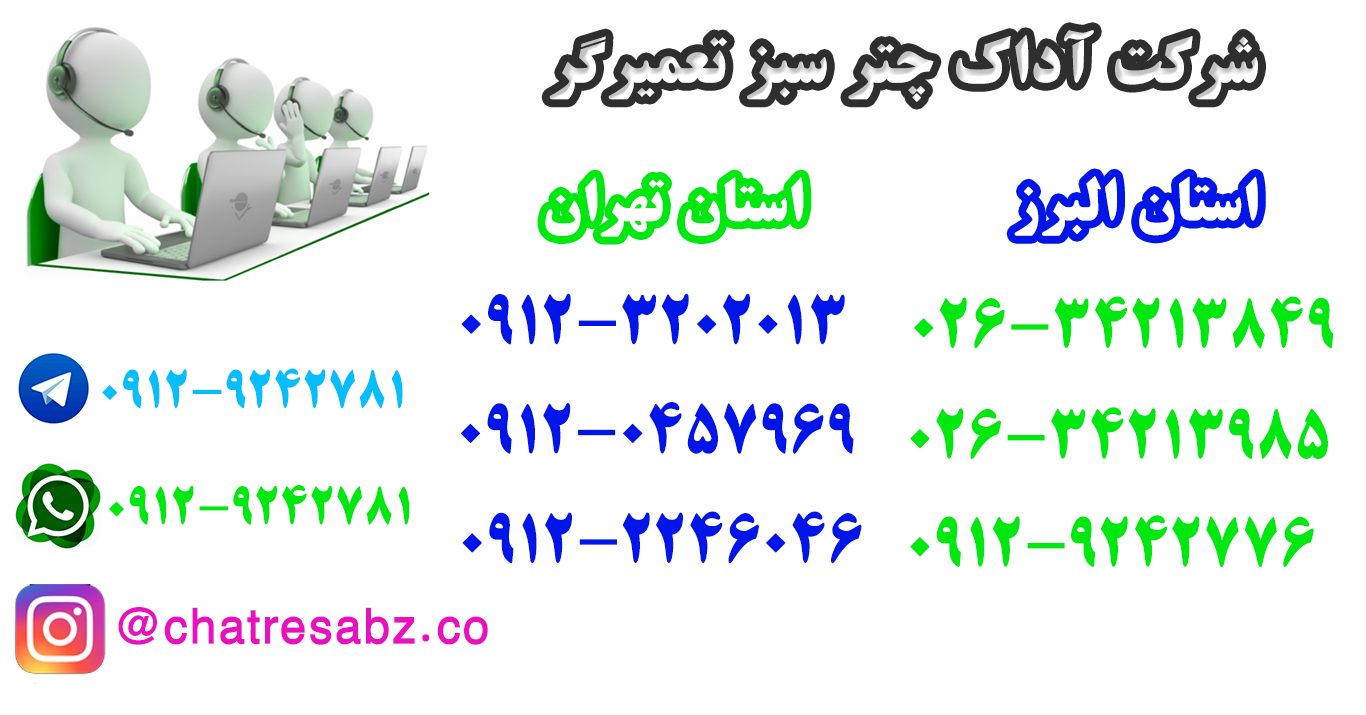
<style>
.page{position:relative;width:1366px;height:715px;background:#ffffff}
.page>*{position:absolute;margin:0}
.t1{font:59.6px "BTitrBold";letter-spacing:0.02em;color:#ffffff}
.t2{font:59.6px "BTitrBold";letter-spacing:0.02em;color:#0016e8}
.t3{font:59.6px "BTitrBold";letter-spacing:0.02em;color:#00e810}
.t4{font:45.9px "BTitrBold";letter-spacing:0.02em;color:#06befb}
.t5{font:45.9px "BTitrBold";letter-spacing:0.02em;color:#00e810}
.t6{font:50px "BYekan+-Bold";letter-spacing:0.02em;color:#e910be}
</style>
<div class="page">
<p class="t1" style="left:545px;top:177px;width:259px;height:60px">استان تهران</p>
<p class="t1" style="left:1014px;top:176px;width:244px;height:60px">استان البرز</p>
<p class="t2" style="left:461px;top:293px;width:384px;height:52px">۰۹۱۲-۳۲۰۲۰۱۳</p>
<p class="t3" style="left:914px;top:296px;width:420px;height:53px">۰26-34213849</p>
<p class="t4" style="left:102px;top:368px;width:301px;height:41px">۰۹۱۲-9242781</p>
<p class="t2" style="left:460px;top:402px;width:394px;height:52px">۰۹۱۲-0457969</p>
<p class="t3" style="left:910px;top:407px;width:418px;height:53px">۰26-34213985</p>
<p class="t5" style="left:109px;top:485px;width:301px;height:40px">۰۹۱۲-9242781</p>
<p class="t2" style="left:462px;top:511px;width:400px;height:53px">۰۹۱۲-2246046</p>
<p class="t3" style="left:910px;top:515px;width:404px;height:52px">۰۹۱۲-9242776</p>
<p class="t6" style="left:118px;top:607px;width:370px;height:38px">chatresabz.co@</p>
</div>
